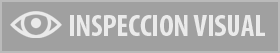
<style>
.page{position:relative;width:280px;height:53px;background:#a0a0a0}
.page>*{position:absolute;margin:0}
.t1{font:30px "MyriadPro-BoldCond";color:#eaeaea}
</style>
<div class="page">
<p class="t1" style="left:70px;top:15px;width:195px;height:21px">INSPECCION VISUAL</p>
</div>
